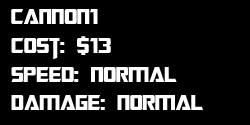
<style>
.page{position:relative;width:250px;height:125px;background:#000000}
.page>*{position:absolute;margin:0}
.t1{font:24px "TransformersMovie";color:#ffffff}
</style>
<div class="page">
<p class="t1" style="left:11px;top:9px;width:192px;height:101px">cannon1<br>Cost: $13<br>Speed: Normal<br>Damage: Normal</p>
</div>
